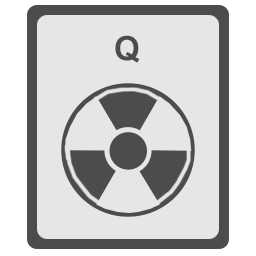
<style>
.page{position:relative;width:256px;height:256px;background:#e6e6e6}
.page>*{position:absolute;margin:0}
.t1{font:33.3px "Arial-BoldMT";color:#4c4c4c}
</style>
<div class="page">
<p class="t1" style="left:115px;top:35px;width:25px;height:28px">Q</p>
</div>
